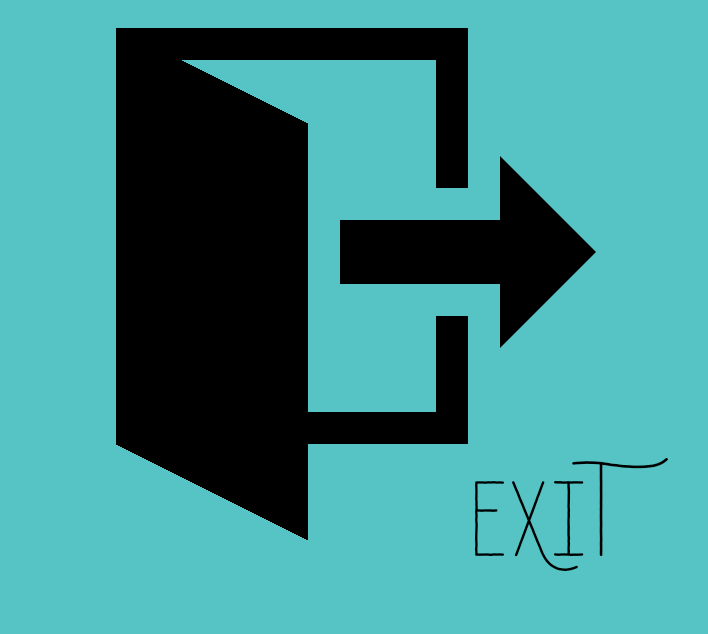
<style>
.page{position:relative;width:708px;height:634px;background:#56c4c5}
.page>*{position:absolute;margin:0}
.t1{font:150px "Adrift";color:#000000}
</style>
<div class="page">
<p class="t1" style="left:475px;top:457px;width:193px;height:115px">EXIT</p>
</div>
